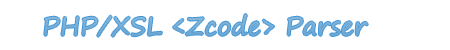
<style>
.page{position:relative;width:450px;height:50px;background:#ffffff}
.page>*{position:absolute;margin:0}
.t1{font:25px "SegoePrint";color:#6ca6d1}
</style>
<div class="page">
<p class="t1" style="left:44px;top:14px;width:324px;height:23px">PHP/XSL &lt;Zcode&gt; Parser</p>
</div>
